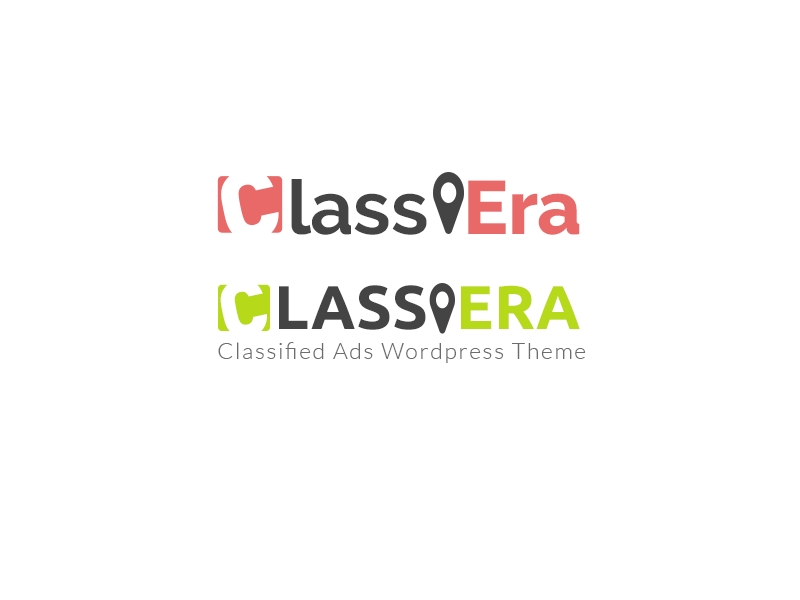
<style>
.page{position:relative;width:800px;height:600px;background:#ffffff}
.page>*{position:absolute;margin:0}
.t1{font:75.6px "Raleway-Bold";letter-spacing:-0.005em;color:#444444}
.t2{font:75.6px "Raleway-ExtraBold";letter-spacing:-0.005em;color:#e96969}
.t3{font:61.7px "Ubuntu-Bold";letter-spacing:-0.005em;color:#444444;text-transform:uppercase}
.t4{font:61.7px "Ubuntu-Bold";letter-spacing:-0.005em;color:#b6d91a;text-transform:uppercase}
.t5{font:22.9px "Lato-Light";letter-spacing:0.075em;color:#6c6c6c}
</style>
<div class="page">
<p class="t1" style="left:291px;top:179px;width:289px;height:56px">lass  <span class="t2">Era</span></p>
<p class="t3" style="left:279px;top:285px;width:301px;height:45px">lass  <span class="t4">Era</span></p>
<p class="t5" style="left:218px;top:342px;width:368px;height:21px">Classified Ads Wordpress Theme</p>
</div>
